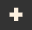
<style>
.page{position:relative;width:32px;height:30px;background:#333333}
.page>*{position:absolute;margin:0}
.t1{font:24px "Herald";color:#fdf1e1}
</style>
<div class="page">
<p class="t1" style="left:9px;top:7px;width:14px;height:14px">+</p>
</div>
